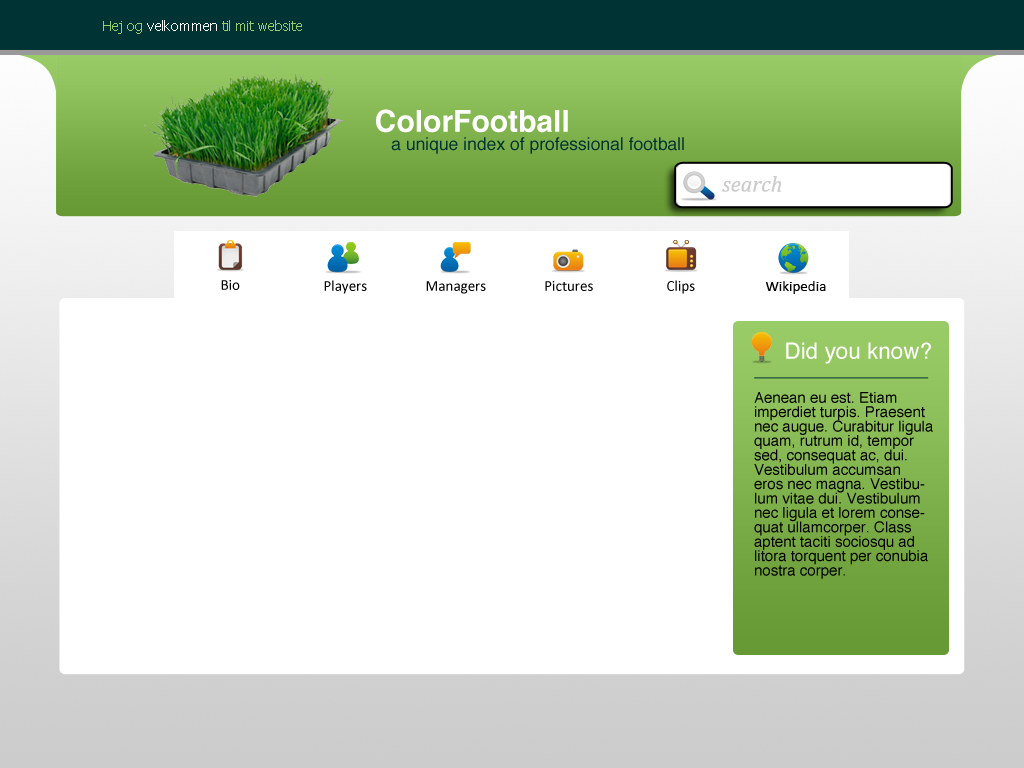
<style>
.page{position:relative;width:1024px;height:768px;background:#ffffff}
.page>*{position:absolute;margin:0}
.t1{font:13.8px "Tahoma";color:#99cc66}
.t2{font:13.8px "Tahoma";color:#ffffff}
.t3{font:30px "Helvetica-Bold";color:#ffffff}
.t4{font:17.5px "Helvetica";color:#003333}
.t5{font:22px "Cambria-Italic";color:#cccccc}
.t6{font:15px "Calibri";color:#000000}
.t7{font:22.5px "Helvetica";color:#ffffff}
.t8{font:15px "Helvetica";color:#000000}
</style>
<div class="page">
<p class="t1" style="left:103px;top:20px;width:199px;height:14px">Hej og <span class="t2">velkommen</span> til mit website</p>
<p class="t3" style="left:376px;top:109px;width:192px;height:24px">ColorFootball</p>
<p class="t4" style="left:391px;top:137px;width:293px;height:17px">a unique index of professional football</p>
<p class="t5" style="left:722px;top:176px;width:59px;height:16px">search</p>
<p class="t6" style="left:221px;top:280px;width:19px;height:10px">Bio</p>
<p class="t6" style="left:324px;top:280px;width:43px;height:14px">Players</p>
<p class="t6" style="left:426px;top:281px;width:60px;height:13px">Managers</p>
<p class="t6" style="left:545px;top:281px;width:48px;height:10px">Pictures</p>
<p class="t6" style="left:667px;top:280px;width:28px;height:14px">Clips</p>
<p class="t6" style="left:765px;top:281px;width:61px;height:13px">Wikipedia</p>
<p class="t7" style="left:786px;top:342px;width:145px;height:22px">Did you know?</p>
<p class="t8" style="left:754px;top:392px;width:179px;height:187px">Aenean eu est. Etiam imperdiet turpis. Praesent nec augue. Curabitur ligula quam, rutrum id, tempor sed, consequat ac, dui. Vestibulum accumsan eros nec magna. Vestibulum vitae dui. Vestibulum nec ligula et lorem consequat ullamcorper. Class aptent taciti sociosqu ad litora torquent per conubia nostra corper.</p>
</div>
